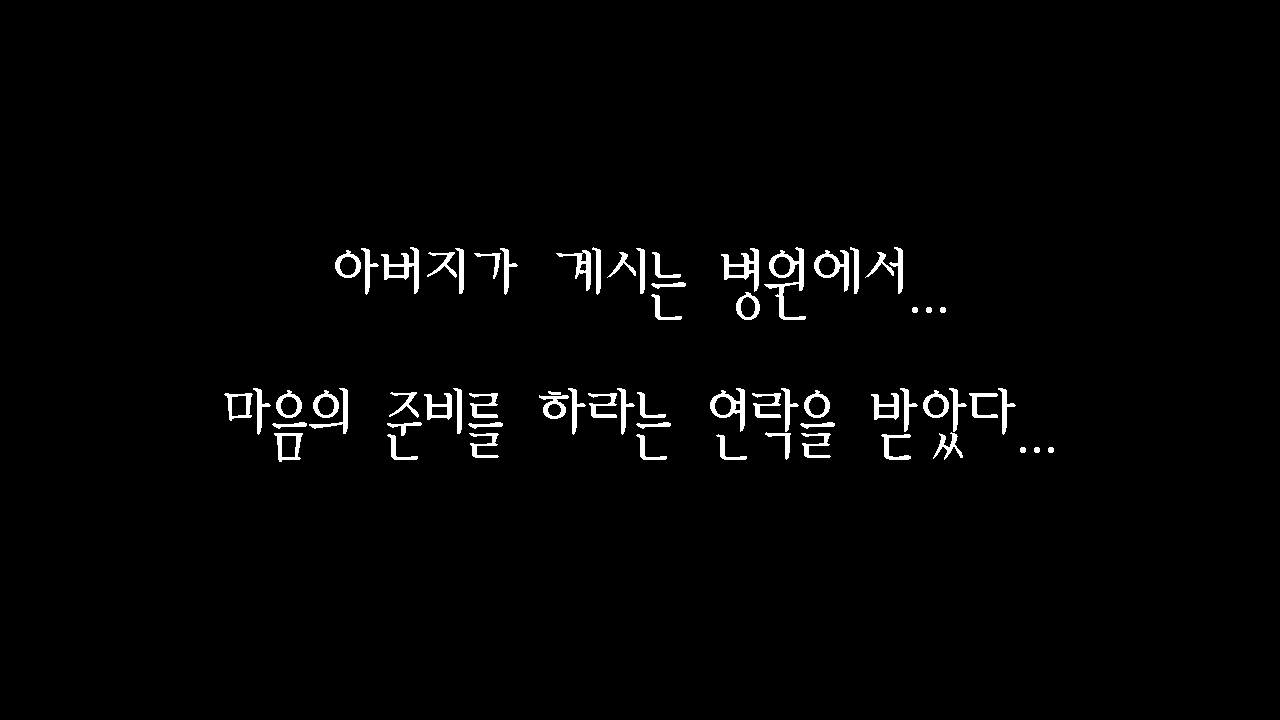
<style>
.page{position:relative;width:1280px;height:720px;background:#000000}
.page>*{position:absolute;margin:0}
.t1{font:80px "AmiR-HM";color:#ffffff}
</style>
<div class="page">
<p class="t1" style="left:224px;top:247px;width:830px;height:215px;text-align:center">아버지가 계시는 병원에서...<br>마음의 준비를 하라는 연락을 받았다...</p>
</div>
